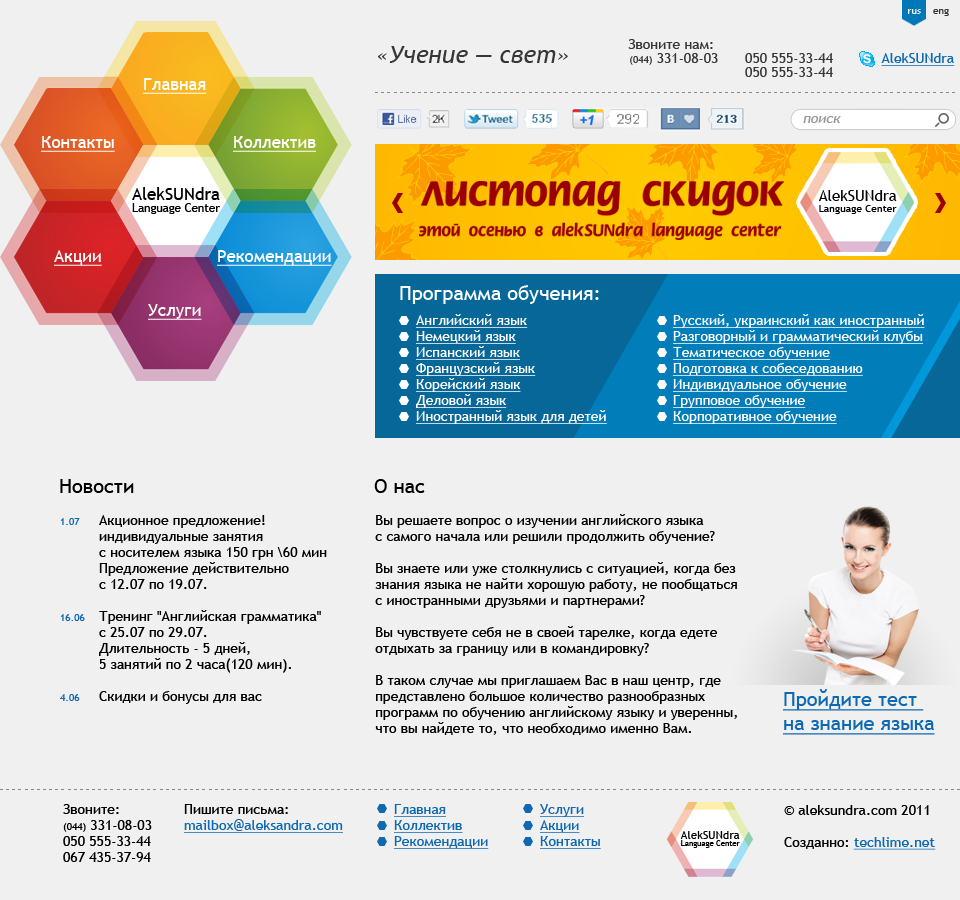
<style>
.page{position:relative;width:960px;height:900px;background:#f0f0f0}
.page>*{position:absolute;margin:0}
.t1{font:10px "TrebuchetMS";color:#ffffff}
.t2{font:10px "TrebuchetMS";color:#373737}
.t3{font:14px/14px "TrebuchetMS";color:#373737}
.t4{font:10px/14px "TrebuchetMS";color:#373737}
.t5{font:24px "TrebuchetMS-Italic";color:#373737}
.t6{font:14px "TrebuchetMS";color:#0e69b2;text-decoration:underline}
.t7{font:17px "TrebuchetMS";color:#ffffff;text-decoration:underline}
.t8{font:14px "TrebuchetMS";color:#999999;font-style:italic}
.t9{font:17px "TrebuchetMS";color:#000000}
.t10{font:15.1px "TrebuchetMS";color:#000000}
.t11{font:11.7px "TrebuchetMS";color:#000000}
.t12{font:10.3px "TrebuchetMS";color:#000000}
.t13{font:20px "TrebuchetMS";color:#ffffff}
.t14{font:14px/16px "TrebuchetMS";color:#ffffff;text-decoration:underline}
.t15{font:20px "TrebuchetMS";color:#000000}
.t16{font:10px "TrebuchetMS";color:#0e69b2}
.t17{font:14px/16px "TrebuchetMS";color:#000000}
.t18{font:20px/24px "TrebuchetMS";color:#0e69b2;text-decoration:underline}
.t19{font:10px/16px "TrebuchetMS";color:#000000}
.t20{font:14px/16px "TrebuchetMS";color:#0e69b2;text-decoration:underline}
.t21{font:14px/16px "TrebuchetMS";color:#010101}
.t22{font:11.4px "TrebuchetMS";color:#000000}
.t23{font:7.8px "TrebuchetMS";color:#000000}
</style>
<div class="page">
<p class="t1" style="left:908px;top:9px;width:41px;height:7px">rus<span class="t2">    eng</span></p>
<p class="t3" style="left:628px;top:39px;width:90px;height:26px;text-align:right">Звоните нам: <br><span class="t4">(044)</span> 331-08-03</p>
<p class="t5" style="left:378px;top:46px;width:190px;height:17px">«Учение — свет»</p>
<p class="t3" style="left:745px;top:53px;width:88px;height:24px;text-align:right">050 555-33-44<br>050 555-33-44</p>
<p class="t6" style="left:881px;top:53px;width:74px;height:13px">AlekSUNdra</p>
<p class="t7" style="left:143px;top:78px;width:64px;height:16px">Главная</p>
<p class="t8" style="left:803px;top:116px;width:38px;height:7px">поиск</p>
<p class="t7" style="left:41px;top:136px;width:74px;height:16px">Контакты</p>
<p class="t7" style="left:233px;top:136px;width:83px;height:16px">Коллектив</p>
<p class="t9" style="left:132px;top:187px;width:88px;height:13px">AlekSUNdra</p>
<p class="t10" style="left:819px;top:190px;width:78px;height:11px">AlekSUNdra</p>
<p class="t11" style="left:132px;top:203px;width:88px;height:11px">Language Center</p>
<p class="t12" style="left:819px;top:205px;width:78px;height:9px">Language Center</p>
<p class="t7" style="left:54px;top:250px;width:48px;height:16px">Акции</p>
<p class="t7" style="left:217px;top:250px;width:115px;height:16px">Рекомендации</p>
<p class="t13" style="left:400px;top:285px;width:199px;height:19px">Программа обучения:</p>
<p class="t7" style="left:148px;top:304px;width:54px;height:16px">Услуги</p>
<p class="t14" style="left:416px;top:314px;width:191px;height:110px">Английский язык<br>Немецкий язык<br>Испанский язык<br>Французский язык<br>Корейский язык<br>Деловой язык<br>Иностранный язык для детей</p>
<p class="t14" style="left:673px;top:314px;width:252px;height:110px">Русский, украинский как иностранный<br>Разговорный и грамматический клубы<br>Тематическое обучение<br>Подготовка к собеседованию<br>Индивидуальное обучение<br>Групповое обучение<br>Корпоративное обучение</p>
<p class="t15" style="left:60px;top:479px;width:74px;height:14px">Новости</p>
<p class="t15" style="left:374px;top:479px;width:51px;height:14px">О нас</p>
<p class="t16" style="left:60px;top:518px;width:20px;height:7px">1.07</p>
<p class="t17" style="left:99px;top:515px;width:228px;height:189px">Aкционное предложение! <br>индивидуальные занятия <br>с носителем языка 150 грн \60 мин<br>Предложение действительно <br>с 12.07 по 19.07.<br><br>Тренинг "Английская грамматика" <br>с 25.07 по 29.07. <br>Длительность - 5 дней, <br>5 занятий по 2 часа(120 мин). <br><br>Скидки и бонусы для вас</p>
<p class="t17" style="left:375px;top:514px;width:362px;height:221px">Вы решаете вопрос о изучении английского языка <br>с самого начала или решили продолжить обучение?<br><br>Вы знаете или уже столкнулись с ситуацией, когда без <br>знания языка не найти хорошую работу, не пообщаться <br>с иностранными друзьями и партнерами?<br><br>Вы чувствуете себя не в своей тарелке, когда едете <br>отдыхать за границу или в командировку?<br><br>В таком случае мы приглашаем Вас в наш центр, где <br>представлено большое количество разнообразных <br>программ по обучению английскому языку и уверенны, <br>что вы найдете то, что необходимо именно Вам.</p>
<p class="t16" style="left:60px;top:614px;width:25px;height:7px">16.06</p>
<p class="t18" style="left:783px;top:689px;width:152px;height:46px">Пройдите тест <br>на знание языка</p>
<p class="t16" style="left:60px;top:694px;width:20px;height:7px">4.06</p>
<p class="t17" style="left:63px;top:804px;width:89px;height:58px">Звоните:<br><span class="t19">(044)</span> 331-08-03<br>050 555-33-44<br>067 435-37-94</p>
<p class="t20" style="left:184px;top:804px;width:159px;height:29px"><span class="t21">Пишите письма:<br></span>mailbox@aleksandra.com</p>
<p class="t20" style="left:394px;top:804px;width:95px;height:45px">Главная<br>Коллектив<br>Рекомендации</p>
<p class="t20" style="left:540px;top:804px;width:61px;height:45px">Услуги<br>Акции<br>Контакты</p>
<p class="t17" style="left:784px;top:805px;width:152px;height:45px">© aleksundra.com 2011<br><br>Созданно: <span class="t20">techlime.net</span></p>
<p class="t22" style="left:680px;top:831px;width:60px;height:8px">AlekSUNdra</p>
<p class="t23" style="left:681px;top:840px;width:59px;height:8px">Language Center</p>
</div>
